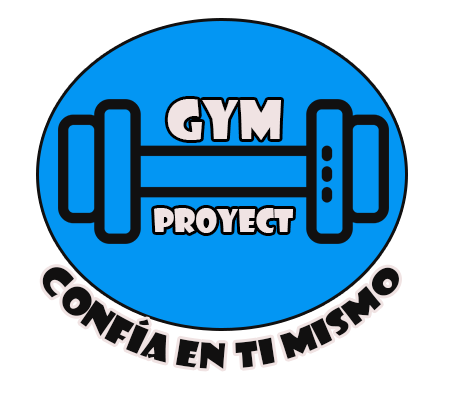
<style>
.page{position:relative;width:462px;height:412px;background:#ffffff}
.page>*{position:absolute;margin:0}
.t1{font:51.8px "ShowcardGothic-Reg";color:#f0e3e3}
.t2{font:31.1px "ShowcardGothic-Reg";color:#f0e3e3}
.t3{font:33.2px "ShowcardGothic-Reg";color:#111010}
</style>
<div class="page">
<p class="t1" style="left:167px;top:99px;width:114px;height:41px">GYM</p>
<p class="t2" style="left:154px;top:208px;width:139px;height:25px">PROYECT</p>
<p class="t3" style="left:42px;top:267px;width:357px;height:102px;text-align:center">CONFÍA EN TI MISMO</p>
</div>
